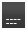
<style>
.page{position:relative;width:27px;height:30px;background:#f9f9f9}
.page>*{position:absolute;margin:0}
.t1{font:9px/4px "Raleway-Bold";color:#f9f9f9}
</style>
<div class="page">
<p class="t1" style="left:6px;top:19px;width:15px;height:5px">----<br>---</p>
</div>
